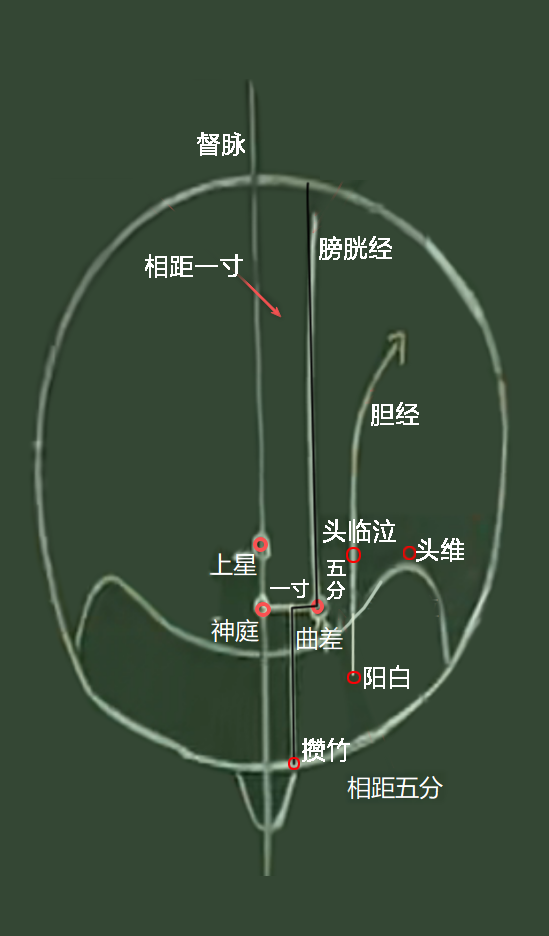
<style>
.page{position:relative;width:549px;height:936px;background:#344734}
.page>*{position:absolute;margin:0}
.t1{font:24px "MicrosoftYaHeiLight";color:#ffffff;font-weight:bold}
.t2{font:18.7px "MicrosoftYaHeiLight";color:#ffffff;font-weight:bold}
</style>
<div class="page">
<p class="t1" style="left:197px;top:132px;width:48px;height:24px">督脉</p>
<p class="t1" style="left:319px;top:236px;width:73px;height:24px">膀胱经</p>
<p class="t1" style="left:145px;top:254px;width:98px;height:24px">相距一寸</p>
<p class="t1" style="left:371px;top:402px;width:48px;height:24px">胆经</p>
<p class="t1" style="left:323px;top:519px;width:73px;height:24px">头临泣</p>
<p class="t1" style="left:416px;top:538px;width:48px;height:24px">头维</p>
<p class="t2" style="left:327px;top:560px;width:19px;height:40px">五<br>分</p>
<p class="t2" style="left:270px;top:579px;width:39px;height:19px">一寸</p>
<p class="t1" style="left:364px;top:665px;width:45px;height:24px">阳白</p>
<p class="t1" style="left:302px;top:738px;width:48px;height:24px">攒竹</p>
</div>
